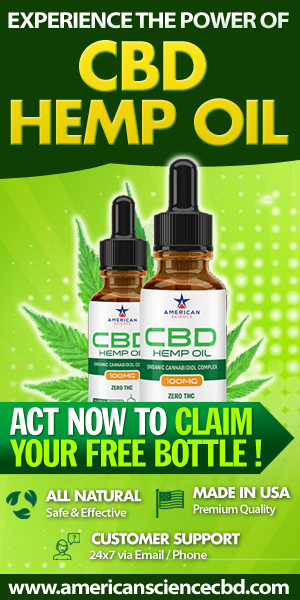
<style>
.page{position:relative;width:300px;height:600px;background:#0f3f02}
.page>*{position:absolute;margin:0}
.t1{font:22.9px "MyriadPro-BoldSemiExt";letter-spacing:-0.05em;color:#ffffff;text-transform:uppercase}
.t2{font:60px/54px "FuturaLT-Bold";letter-spacing:-0.05em}
.t3{font:66px/54px "FuturaLT-Bold";letter-spacing:-0.05em}
.t4{font:36.7px/31.7px "FranklinGoth-ExtCondensed";letter-spacing:-0.05em;color:#a9ff00;text-transform:uppercase}
.t5{font:36.7px/31.7px "FranklinGoth-ExtCondensed";letter-spacing:-0.05em;color:#ffffff;text-transform:uppercase}
.t6{font:12.6px/15.4px "MyriadPro-Semibold";letter-spacing:-0.05em;color:#ffffff}
.t7{font:14.7px/15.4px "FuturaLT-Bold";letter-spacing:-0.05em;color:#ffffff}
.t8{font:12.6px/15.4px "MyriadPro-SemiboldSemiExt";letter-spacing:-0.05em;color:#ffffff}
.t9{font:12.6px/14.7px "MyriadPro-SemiboldSemiExt";letter-spacing:-0.05em;color:#ffffff}
.t10{font:14.7px/14.7px "MyriadPro-Semibold";letter-spacing:-0.05em;color:#08ad58}
.t11{font:14.7px/14.7px "FuturaLT-Bold";letter-spacing:-0.05em;color:#ffffff}
.t12{font:21px "MyriadPro-BoldSemiExt";letter-spacing:-0.05em;color:#ffffff}
</style>
<div class="page">
<p class="t1" style="left:8px;top:12px;width:281px;height:17px">Experience The Power Of</p>
<p class="t2" style="left:10px;top:40px;width:279px;height:107px"><span class="t3">CBD</span> <br>HEMP OIL</p>
<p class="t4" style="left:10px;top:407px;width:252px;height:60px"><span class="t5">Act Now To </span>Claim <br>Your Free Bottle !</p>
<p class="t6" style="left:193px;top:486px;width:98px;height:30px"><span class="t7">MADE IN USA<br></span>Premium Quality</p>
<p class="t8" style="left:45px;top:490px;width:97px;height:27px"><span class="t7">ALL NATURAL<br></span>Safe &amp; Effective</p>
<p class="t9" style="left:89px;top:532px;width:151px;height:28px"><span class="t10"> </span><span class="t11">CUSTOMER SUPPORT<br></span>24x7 via Email / Phone</p>
<p class="t12" style="left:8px;top:579px;width:281px;height:16px">www.americansciencecbd.com</p>
</div>
